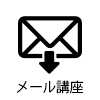
<style>
.page{position:relative;width:100px;height:100px;background:#ffffff}
.page>*{position:absolute;margin:0}
.t1{font:13.6px "KozGoPr6N-Regular";color:#000000}
</style>
<div class="page">
<p class="t1" style="left:16px;top:80px;width:68px;height:14px">メール講座</p>
</div>
